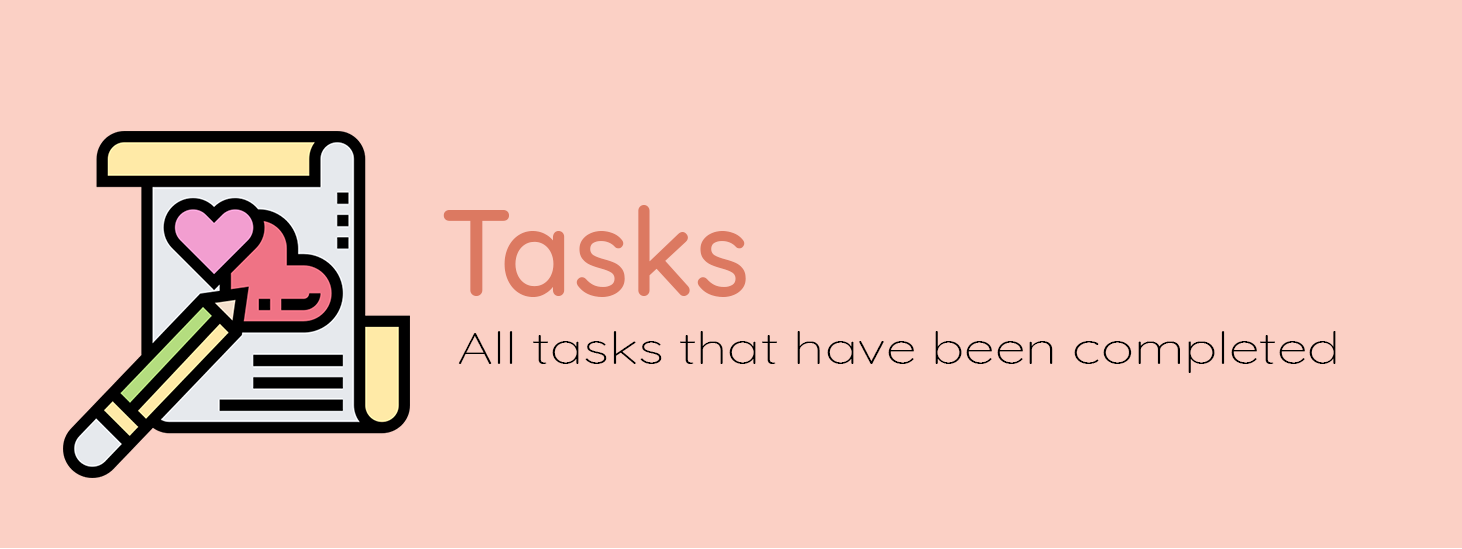
<style>
.page{position:relative;width:1462px;height:549px;background:#fbd0c5}
.page>*{position:absolute;margin:0}
.t1{font:122.1px "Quicksand-Medium";color:#dc7961;scale:0.97 1}
.t2{font:44.9px "Quicksand-Light";color:#000000;scale:1.24 1}
</style>
<div class="page">
<p class="t1" style="left:443px;top:205px;width:303px;height:92px">Tasks</p>
<p class="t2" style="left:458px;top:331px;width:878px;height:42px">All tasks that have been completed</p>
</div>
